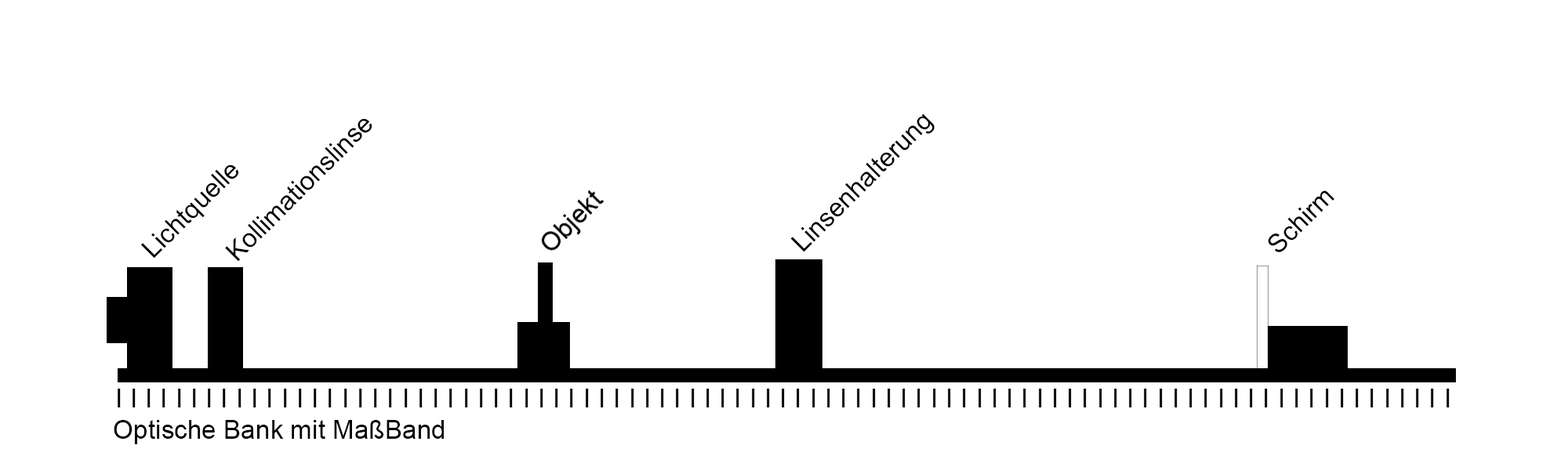
<style>
.page{position:relative;width:1568px;height:456px;background:#ffffff}
.page>*{position:absolute;margin:0}
.t1{font:26.1px "ArialMT";color:#000000}
.t2{font:26.1px "ArialMT";letter-spacing:0.3em;color:#000000}
</style>
<div class="page">
<p class="t1" style="left:790px;top:114px;width:145px;height:138px;rotate:-45deg">Linsenhalterung</p>
<p class="t1" style="left:225px;top:118px;width:147px;height:144px;rotate:-45deg">Kollimationslinse</p>
<p class="t1" style="left:141px;top:165px;width:97px;height:94px;rotate:-45deg">Lichtquelle</p>
<p class="t1" style="left:1268px;top:191px;width:66px;height:61px;rotate:-45deg">Schirm</p>
<p class="t2" style="left:118px;top:389px;width:1332px;height:19px">IIIIIIIIIIIIIIIIIIIIIIIIIIIIIIIIIIIIIIIIIIIIIIIIIIIIIIIIIIIIIIIIIIIIIIIIIIIIIIIIIIIIIIIII</p>
<p class="t1" style="left:114px;top:420px;width:330px;height:25px">Optische Bank mit MaßBand</p>
</div>
